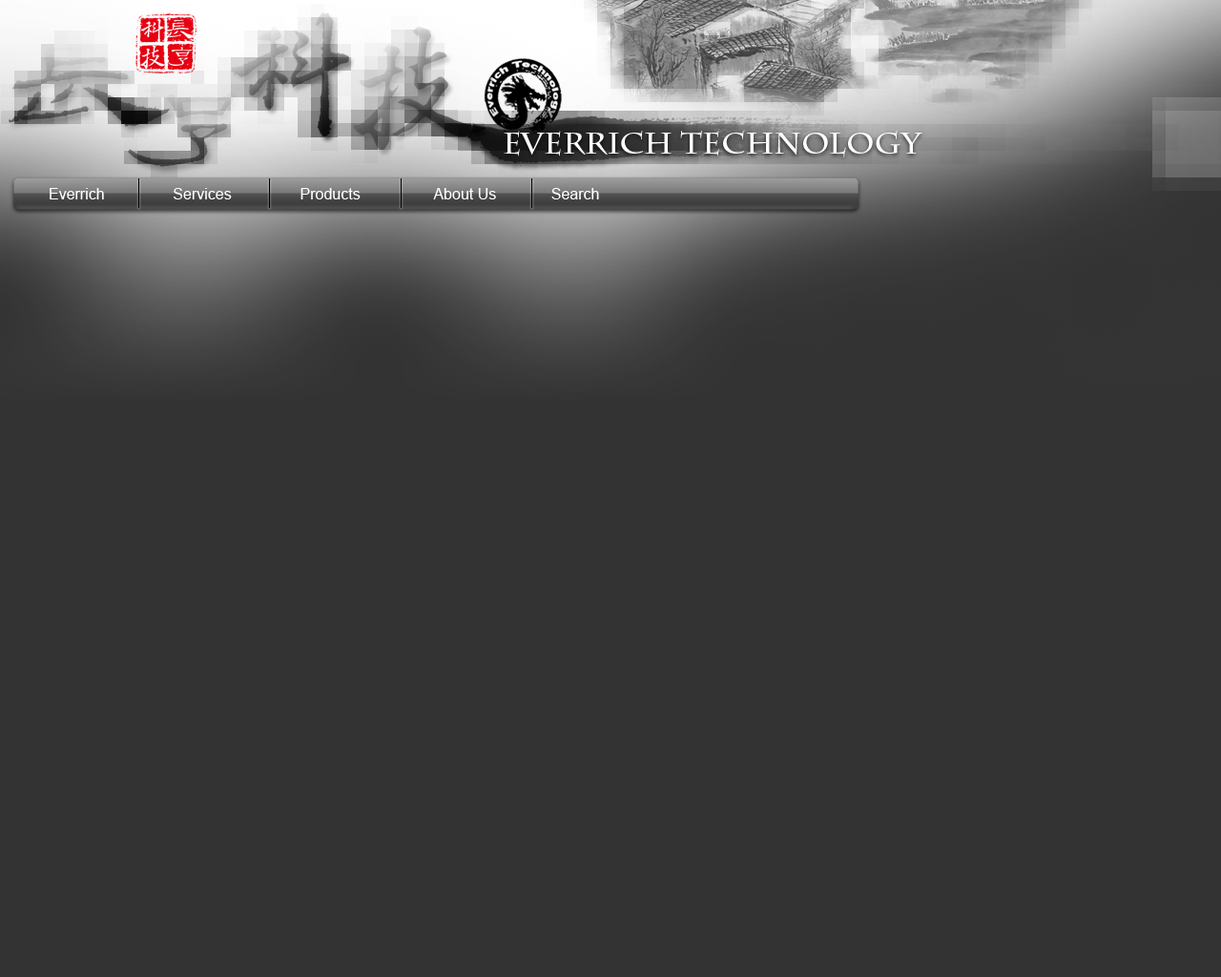
<style>
.page{position:relative;width:1221px;height:977px;background:#333333}
.page>*{position:absolute;margin:0}
.t1{font:29.7px "CharlemagneStd-Bold";color:#fcfcfc}
.t2{font:15.3px "ArialMT";color:#ffffff}
</style>
<div class="page">
<p class="t1" style="left:504px;top:130px;width:418px;height:27px">Everrich Technology</p>
<p class="t2" style="left:50px;top:188px;width:54px;height:11px">Everrich</p>
<p class="t2" style="left:174px;top:188px;width:58px;height:11px">Services</p>
<p class="t2" style="left:300px;top:188px;width:61px;height:11px">Products</p>
<p class="t2" style="left:433px;top:188px;width:63px;height:11px">About Us</p>
<p class="t2" style="left:551px;top:188px;width:48px;height:11px">Search</p>
</div>
